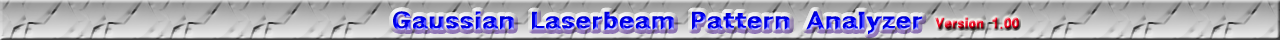
<style>
.page{position:relative;width:1280px;height:40px}
.page>*{position:absolute;margin:0}
.t1{font:24px "GothicXB-HM";scale:1.25 1}
.t2{font:14.4px "GothicXB-HM"}
</style>
<div class="page">
<p class="t1" style="left:393px;top:11px;width:530px;height:24px">Gaussian Laserbeam Pattern Analyzer</p>
<p class="t2" style="left:935px;top:17px;width:84px;height:12px">Version 1.00</p>
</div>
